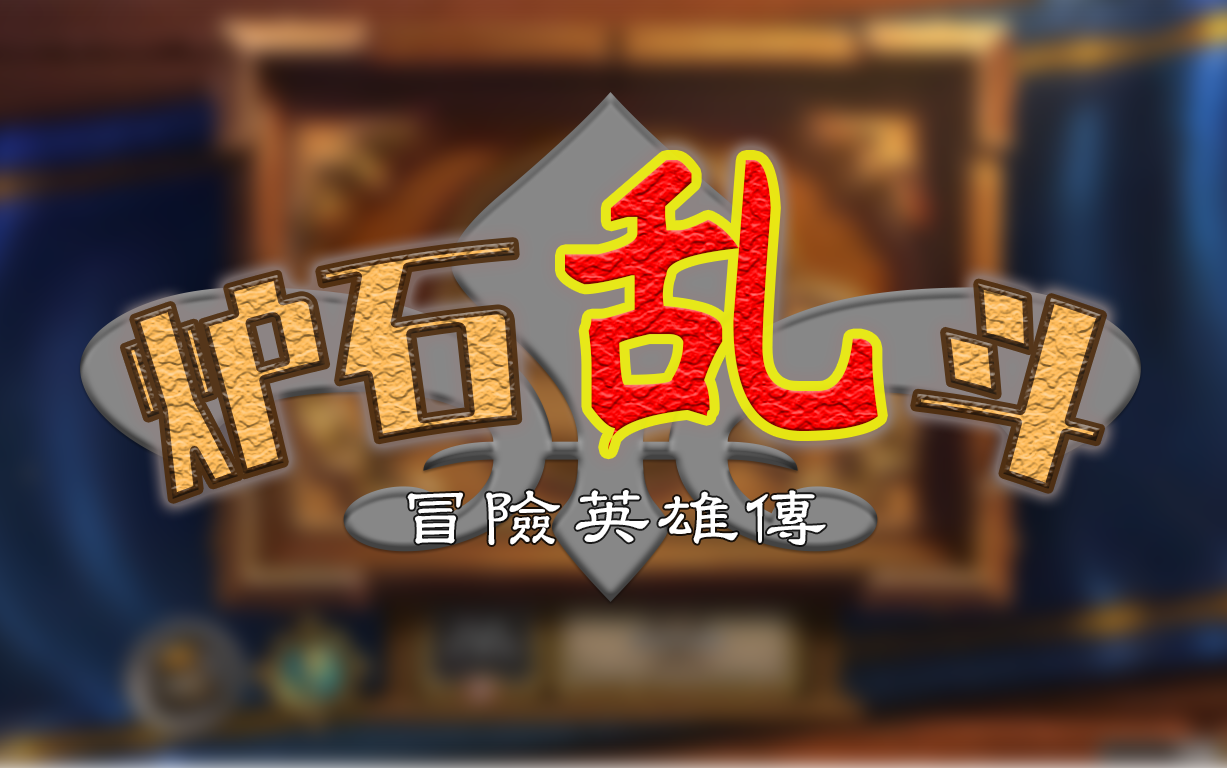
<style>
.page{position:relative;width:1227px;height:768px}
.page>*{position:absolute;margin:0}
.t1{font:383.3px "YRDZST-Bold";scale:0.93 1}
.t2{font:88px "DFSTDLI-Md-HK-BF";color:#ffffff}
</style>
<div class="page">
<p class="t1" style="left:565px;top:160px;width:313px;height:290px">乱</p>
<p class="t2" style="left:407px;top:490px;width:419px;height:55px">冒險英雄傳</p>
</div>
